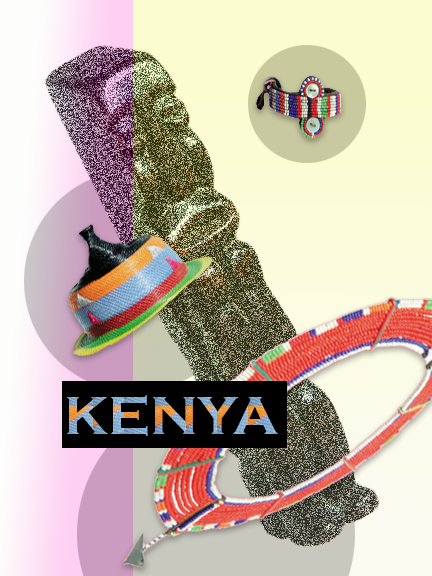
<style>
.page{position:relative;width:432px;height:576px}
.page>*{position:absolute;margin:0}
.t1{font:55px "CopperplateGothic-Bold"}
</style>
<div class="page">
<p class="t1" style="left:67px;top:395px;width:211px;height:41px">KENYA</p>
</div>
